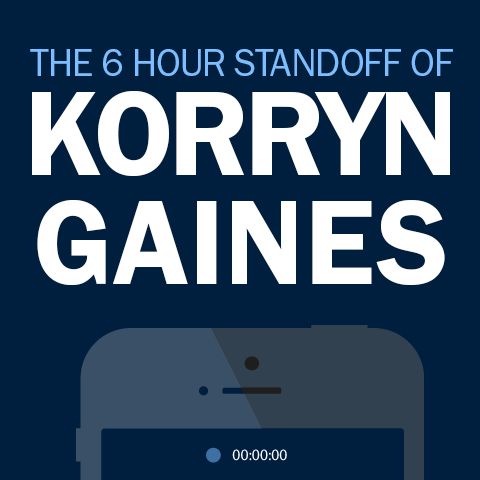
<style>
.page{position:relative;width:480px;height:480px;background:#001f3f}
.page>*{position:absolute;margin:0}
.t1{font:39px "FranklinGothicURW-Boo";letter-spacing:-0.025em;color:#7cbeff;text-transform:uppercase}
.t2{font:123.8px/109.6px "FranklinGothicURW-Dem";letter-spacing:-0.04em;color:#ffffff;text-transform:uppercase}
.t3{font:123.8px/109.6px "FranklinGothicURW-Dem";color:#ffffff;text-transform:uppercase}
</style>
<div class="page">
<p class="t1" style="left:30px;top:49px;width:423px;height:27px">THE 6 HOUR STANDOFF OF</p>
<p class="t2" style="left:32px;top:91px;width:418px;height:194px;text-align:center">KORRYN<br><span class="t3">GAINES</span></p>
</div>
